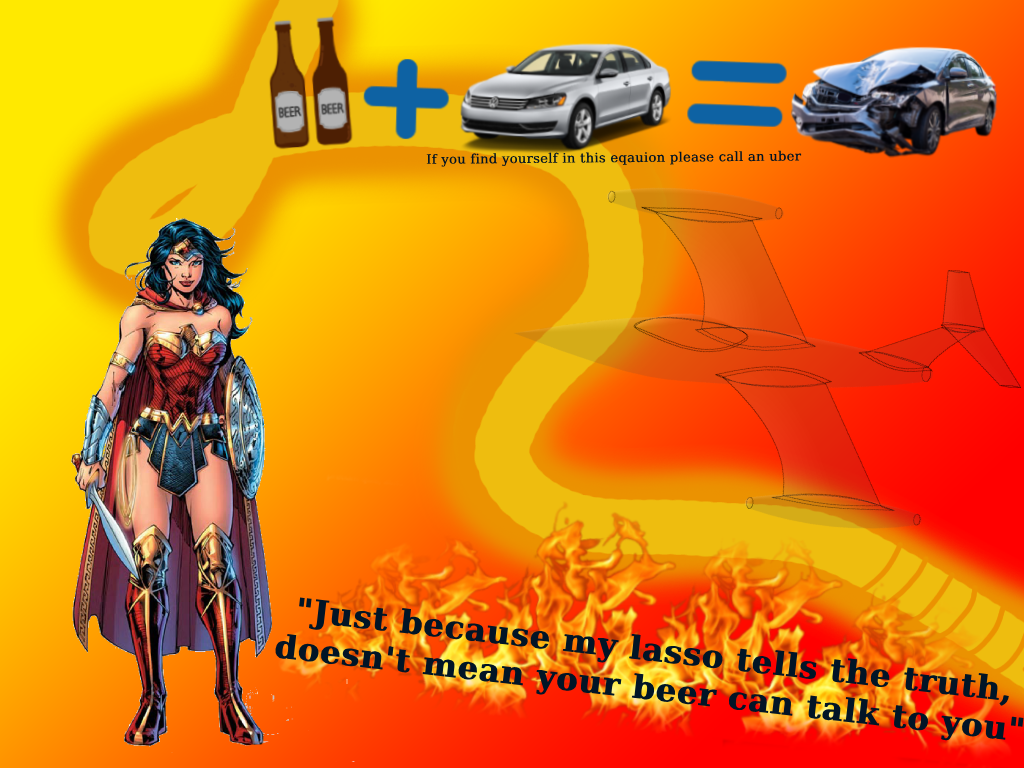
<style>
.page{position:relative;width:1024px;height:768px}
.page>*{position:absolute;margin:0}
.t1{font:13px "DejaVuSerif";color:#011323;font-weight:bold}
.t2{font:32.3px "DejaVuSerif-Bold";color:#011527;font-weight:bold}
</style>
<div class="page">
<p class="t1" style="left:426px;top:150px;width:376px;height:17px;rotate:-1deg">If you find yourself in this eqauion please call an uber</p>
<p class="t2" style="left:275px;top:597px;width:749px;height:144px;text-align:center;rotate:6deg">"Just because my lasso tells the truth,<br>doesn't mean your beer can talk to you"</p>
</div>
